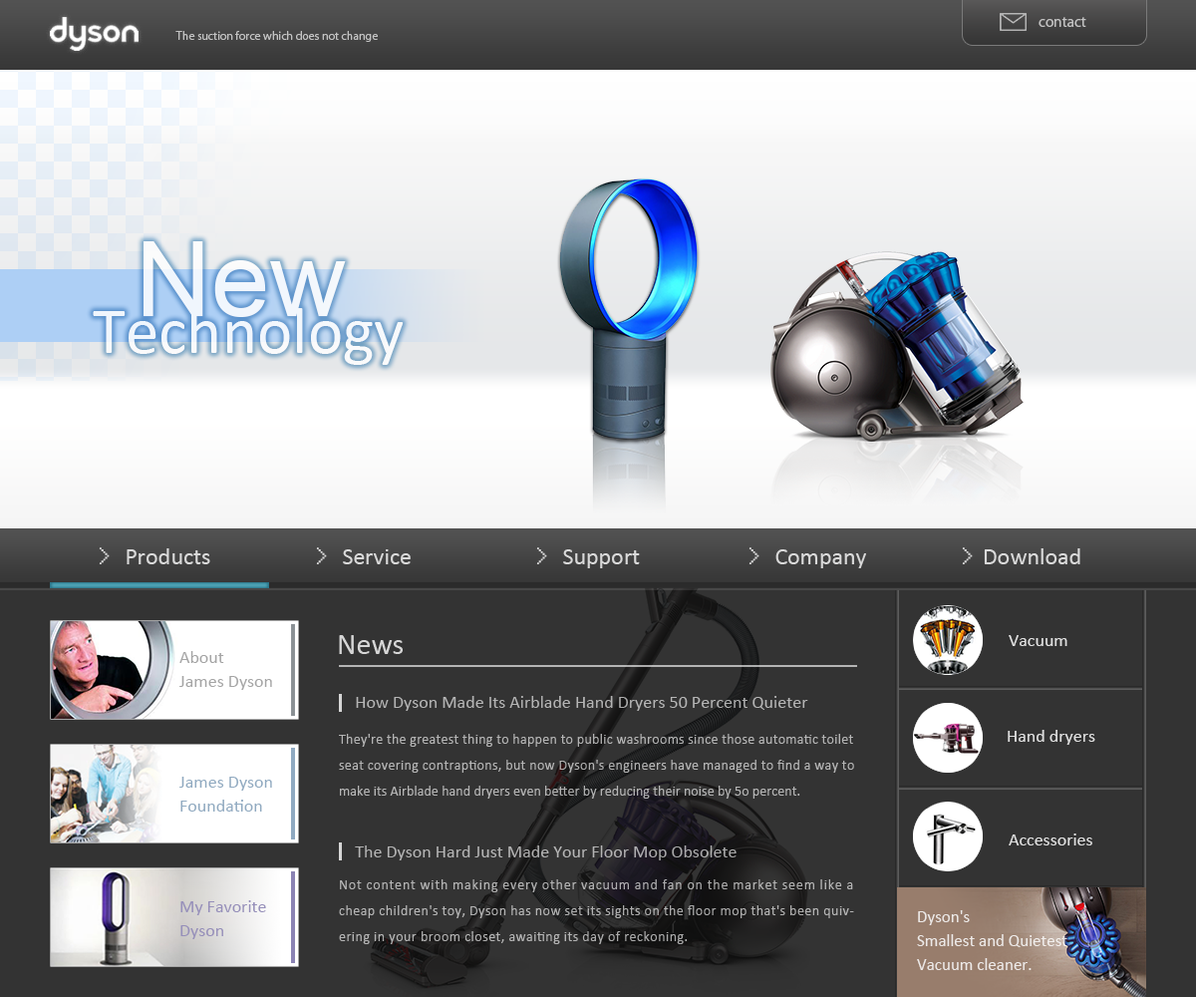
<style>
.page{position:relative;width:1196px;height:997px;background:#333333}
.page>*{position:absolute;margin:0}
.t1{font:14px "KozGoPr6N-Regular";color:#c3c3c3}
.t2{font:11px "KozGoPr6N-Regular";color:#c3c3c3}
.t3{font:66.8px/71.8px "Calibri";color:#ffffff}
.t4{font:104.7px/71.8px "ArialMT";color:#ffffff}
.t5{font:23.9px "Calibri";color:#d9d9d9}
.t6{font:23.9px "Terminal";color:#d9d9d9}
.t7{font:29.9px "Calibri";color:#d6d6d6}
.t8{font:17.9px "Calibri";color:#e0e0e0}
.t9{font:17.9px/23.9px "Calibri";color:#a5a5a5}
.t10{font:14px/25.9px "Calibri";letter-spacing:0.021em;color:#b5b5b5}
.t11{font:17.9px/15px "Calibri";color:#b5b5b5}
.t12{font:14px/25.9px "Calibri";letter-spacing:0.025em;color:#b5b5b5}
.t13{font:14px/34.9px "Calibri";letter-spacing:0.005em;color:#b5b5b5}
.t14{font:14px/25.9px "Calibri";letter-spacing:0.058em;color:#b5b5b5}
.t15{font:14px/25.9px "Calibri";letter-spacing:0.034em;color:#b5b5b5}
.t16{font:14px/25.9px "Calibri";letter-spacing:0.035em;color:#b5b5b5}
.t17{font:17.9px/23.9px "Calibri";color:#90aac1}
.t18{font:17.9px/23.9px "Calibri";color:#968fba}
.t19{font:16.9px/23.9px "Calibri";color:#ffffff}
</style>
<div class="page">
<p class="t1" style="left:1039px;top:17px;width:48px;height:10px">contact</p>
<p class="t2" style="left:175px;top:31px;width:203px;height:11px">The suction force which does not change</p>
<p class="t3" style="left:93px;top:241px;width:311px;height:124px"><span class="t4">  New<br> </span>Technology</p>
<p class="t5" style="left:99px;top:547px;width:111px;height:17px"><span class="t6">&gt;</span>   Products</p>
<p class="t5" style="left:316px;top:547px;width:95px;height:17px"><span class="t6">&gt;</span>   Service</p>
<p class="t5" style="left:536px;top:547px;width:104px;height:21px"><span class="t6">&gt;</span>   Support</p>
<p class="t5" style="left:749px;top:547px;width:117px;height:21px"><span class="t6">&gt;</span>   Company</p>
<p class="t5" style="left:962px;top:547px;width:119px;height:17px"><span class="t6">&gt;</span>  Download</p>
<p class="t7" style="left:339px;top:635px;width:64px;height:19px">News</p>
<p class="t8" style="left:1009px;top:635px;width:59px;height:11px">Vacuum</p>
<p class="t9" style="left:179px;top:651px;width:93px;height:39px">About<br>James Dyson</p>
<p class="t10" style="left:339px;top:696px;width:515px;height:248px"><span class="t11">    How Dyson Made Its Airblade Hand Dryers 50 Percent Quieter<br><br></span>They're the greatest thing to happen to public washrooms since those automatic toilet<br><span class="t12">seat covering contraptions, but now Dyson's engineers have managed to find a way to<br></span><span class="t13">make its Airblade hand dryers even better by reducing their noise by 5o percent.<br><br></span><span class="t11">    The Dyson Hard Just Made Your Floor Mop Obsolete<br><br></span><span class="t14">Not content with making every other vacuum and fan on the market seem like a<br></span><span class="t15">cheap children's toy, Dyson has now set its sights on the floor mop that's been quiv-<br></span><span class="t16">ering in your broom closet, awaiting its day of reckoning.</span></p>
<p class="t8" style="left:1008px;top:730px;width:88px;height:15px">Hand dryers</p>
<p class="t17" style="left:179px;top:777px;width:93px;height:34px">James Dyson<br>Foundation</p>
<p class="t8" style="left:1009px;top:833px;width:84px;height:12px">Accessories</p>
<p class="t18" style="left:180px;top:900px;width:86px;height:39px">My Favorite<br>Dyson</p>
<p class="t19" style="left:917px;top:910px;width:151px;height:60px">Dyson's<br>Smallest and Quietest<br>Vacuum cleaner.</p>
</div>
